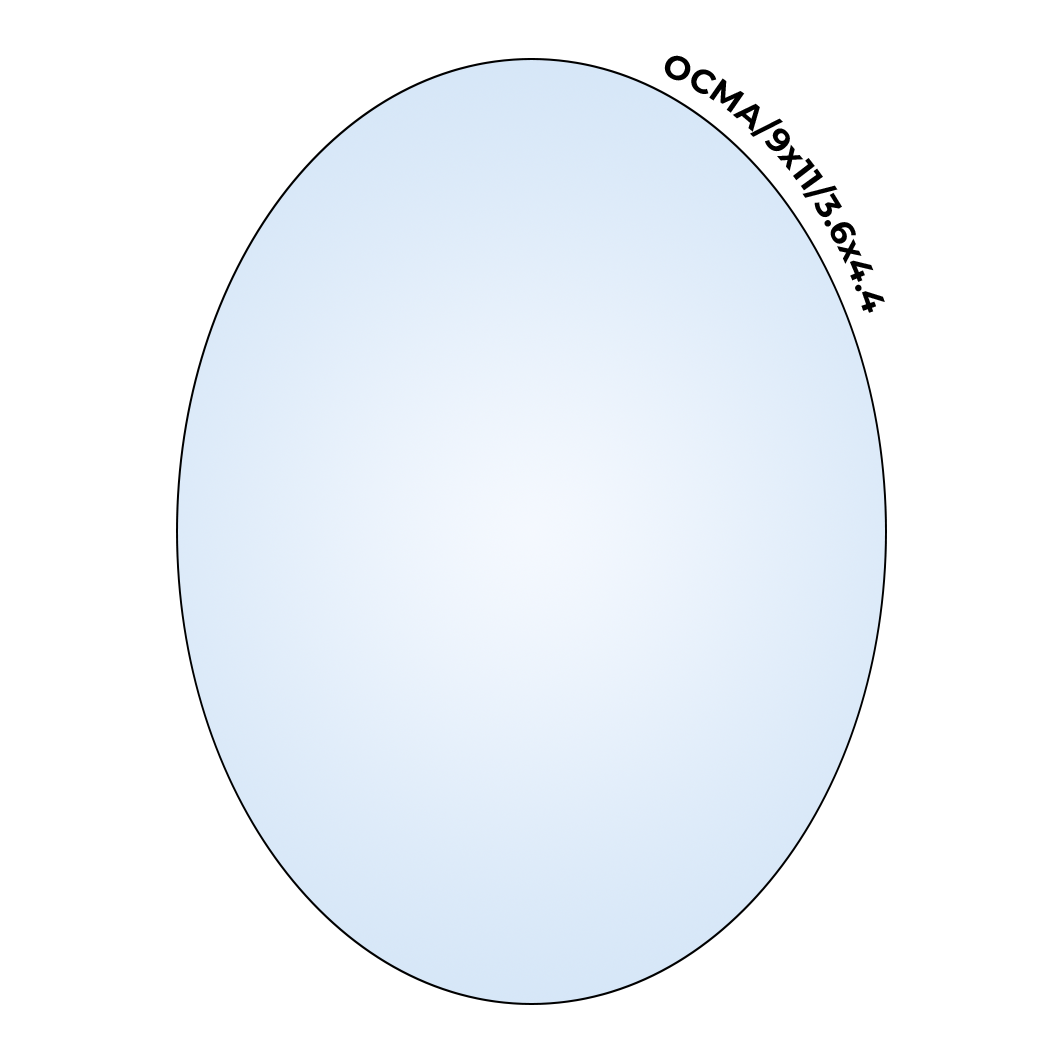
<style>
.page{position:relative;width:1063px;height:1063px;background:#ffffff}
.page>*{position:absolute;margin:0}
.t1{font:33.3px "Montserrat-Bold";color:#000000}
</style>
<div class="page">
<p class="t1" style="left:664px;top:55px;width:221px;height:258px;rotate:7deg">OCMA/9x11/3.6x4.4</p>
</div>
